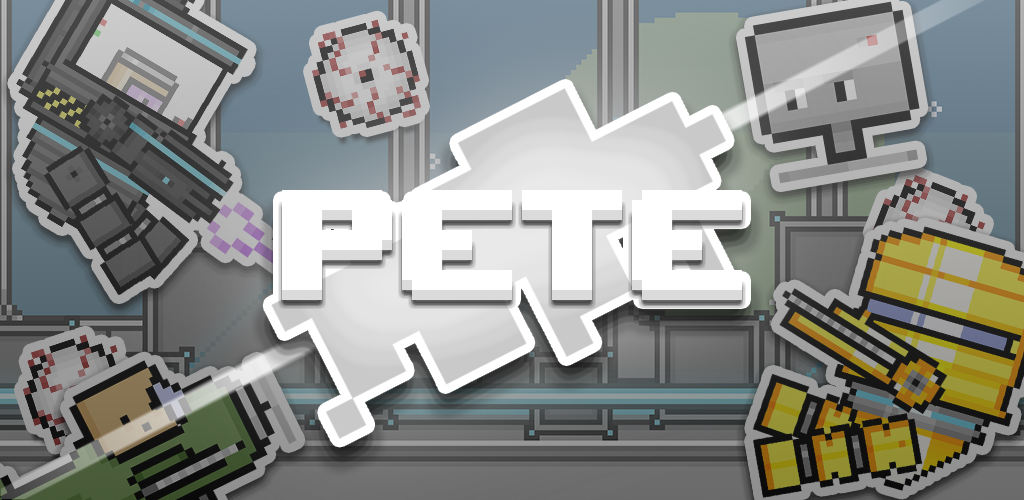
<style>
.page{position:relative;width:1024px;height:500px}
.page>*{position:absolute;margin:0}
.t1{font:200px "UpheavalTT-BRK-";color:#ffffff}
</style>
<div class="page">
<p class="t1" style="left:282px;top:190px;width:460px;height:100px">pete</p>
<p class="t1" style="left:282px;top:200px;width:460px;height:100px">pete</p>
</div>
